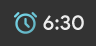
<style>
.page{position:relative;width:96px;height:46px;background:#333333}
.page>*{position:absolute;margin:0}
.t1{font:21px "GoogleSansDisplay-Medium";color:#ececec}
</style>
<div class="page">
<p class="t1" style="left:43px;top:15px;width:41px;height:15px">6:30</p>
</div>
